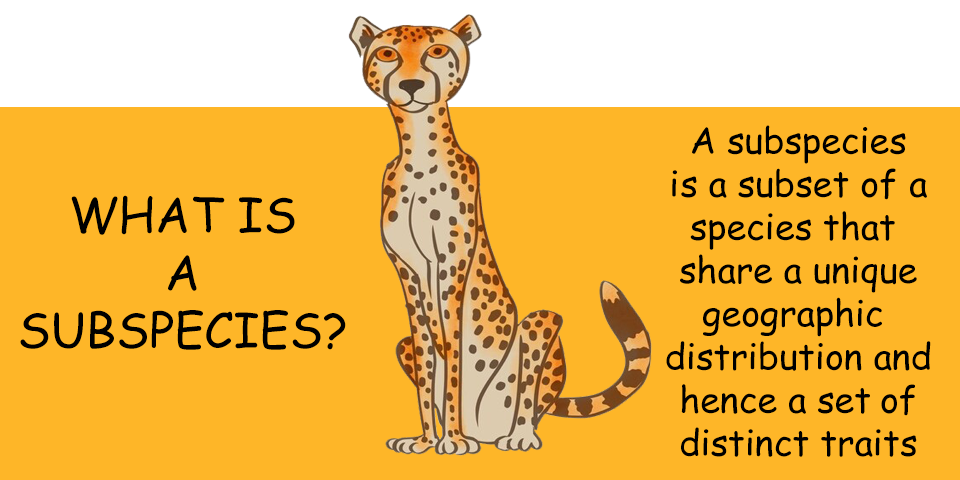
<style>
.page{position:relative;width:960px;height:480px;background:#feb628}
.page>*{position:absolute;margin:0}
.t1{font:36px "ComicSansMS";color:#000000}
.t2{font:48px "ComicSansMS";color:#000000}
</style>
<div class="page">
<p class="t1" style="left:666px;top:125px;width:265px;height:332px;text-align:center">A subspecies<br>is a subset of a<br>species that <br>share a unique<br>geographic <br>distribution and<br>hence a set of<br>distinct traits</p>
<p class="t2" style="left:20px;top:195px;width:326px;height:155px;text-align:center">WHAT IS<br>A<br>SUBSPECIES?</p>
</div>
